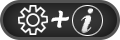
<style>
.page{position:relative;width:120px;height:40px}
.page>*{position:absolute;margin:0}
.t1{font:30px "LucidaHandwriting-Italic";letter-spacing:0.25em;color:#ffffff;text-transform:uppercase;font-weight:bold}
</style>
<div class="page">
<p class="t1" style="left:51px;top:10px;width:18px;height:18px">+</p>
</div>
